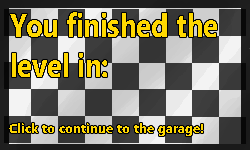
<style>
.page{position:relative;width:250px;height:150px}
.page>*{position:absolute;margin:0}
.t1{font:33.3px "MicrosoftPhagsPa-Bold";color:#ffd800;scale:0.83 1}
.t2{font:12.5px "MicrosoftPhagsPa-Bold";color:#ffd800}
</style>
<div class="page">
<p class="t1" style="left:10px;top:12px;width:207px;height:65px">You finished the level in:</p>
<p class="t2" style="left:9px;top:123px;width:194px;height:13px">Click to continue to the garage!</p>
</div>
